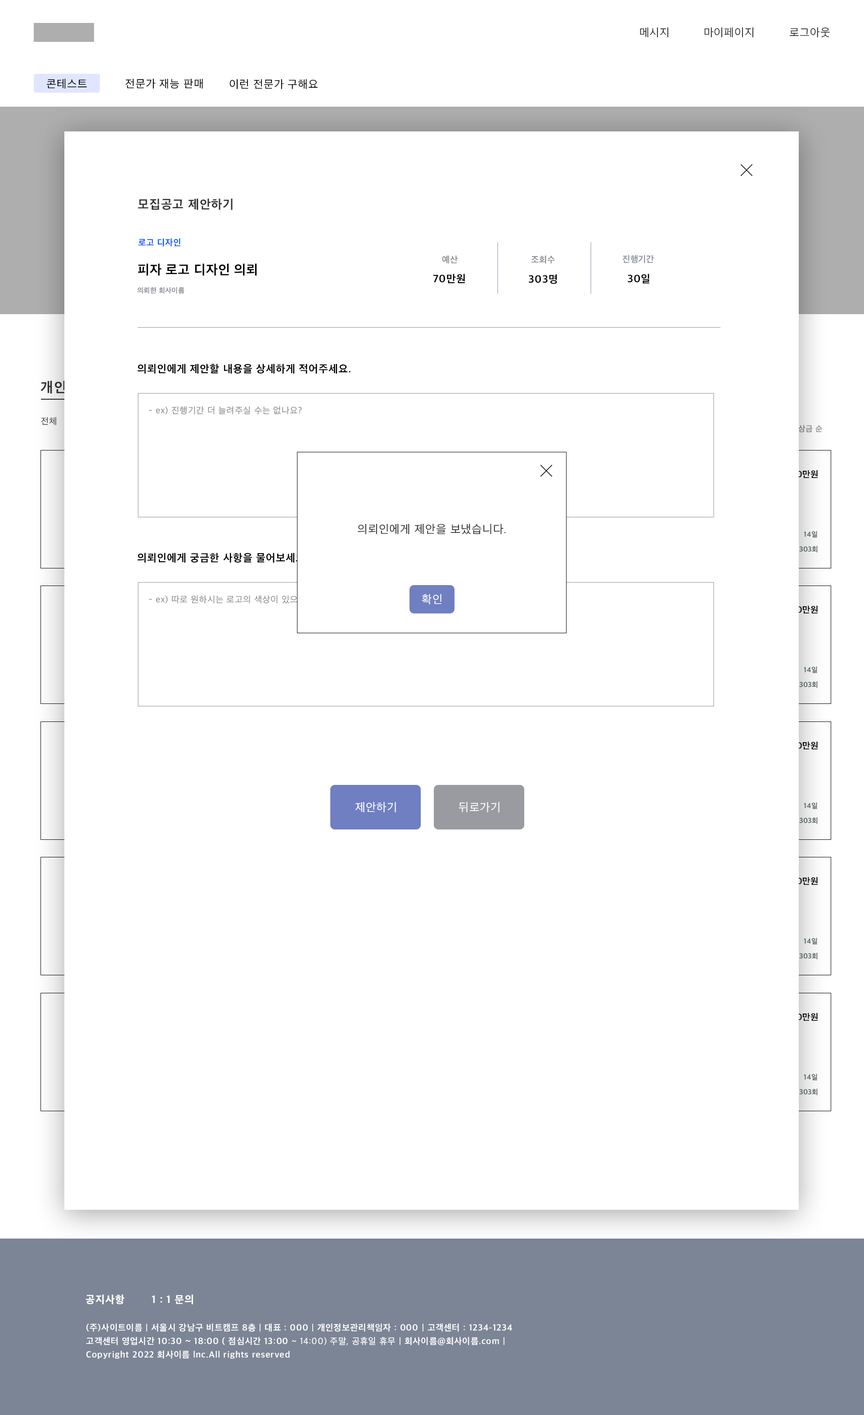
<style>
.page{position:relative;width:864px;height:1415px;background:#ffffff}
.page>*{position:absolute;margin:0}
.t1{font:11.2px "AppleSDGothicNeo-Regular";letter-spacing:0.05em;color:#333333}
.t2{font:11.2px "AppleSDGothicNeo-Regular";letter-spacing:0.05em;color:#000000}
.t3{font:12.7px "AppleSDGothicNeo-Bold";letter-spacing:0.05em;color:#333333}
.t4{font:9px "AppleSDGothicNeo-Bold";letter-spacing:0.03em;color:#0155ff}
.t5{font:9px "AppleSDGothicNeo-Bold";letter-spacing:0.03em;color:#8c9097}
.t6{font:13.5px "AppleSDGothicNeo-Bold";letter-spacing:0.03em;color:#000000}
.t7{font:10.8px "AppleSDGothicNeo-Bold";letter-spacing:0.05em;color:#000000}
.t8{font:7.2px "AppleSDGothicNeo-Bold";letter-spacing:0.03em;color:#8c9097}
.t9{font:14.4px "AppleSDGothicNeo-Bold";letter-spacing:0.05em;color:#333333}
.t10{font:9px "AppleSDGothicNeo-Regular";letter-spacing:0.05em;color:#909090}
.t11{font:9px "AppleSDGothicNeo-Regular";letter-spacing:0.05em;color:#515151}
.t12{font:8.1px "AppleSDGothicNeo-Regular";letter-spacing:0.03em;color:#747474}
.t13{font:9px "AppleSDGothicNeo-Bold";letter-spacing:0.03em;color:#000000}
.t14{font:11.7px "AppleSDGothicNeo-Regular";letter-spacing:0.05em;color:#333333}
.t15{font:7.2px "AppleSDGothicNeo-Bold";letter-spacing:0.03em;color:#606b6e}
.t16{font:11.7px "AppleSDGothicNeo-Regular";letter-spacing:0.05em;color:#ffffff}
.t17{font:10.8px "AppleSDGothicNeo-ExtraBold";letter-spacing:0.05em;color:#ffffff}
.t18{font:9px/13.5px "AppleSDGothicNeo-Bold";letter-spacing:0.05em;color:#ffffff}
.t19{font:9px/13.5px "AppleSDGothicNeo-Regular";letter-spacing:0.05em;color:#ffffff}
</style>
<div class="page">
<p class="t1" style="left:640px;top:27px;width:28px;height:10px">메시지</p>
<p class="t1" style="left:704px;top:27px;width:49px;height:10px">마이페이지</p>
<p class="t1" style="left:790px;top:27px;width:40px;height:10px">로그아웃</p>
<p class="t2" style="left:47px;top:79px;width:40px;height:10px">콘테스트</p>
<p class="t2" style="left:125px;top:79px;width:78px;height:10px">전문가 재능 판매</p>
<p class="t2" style="left:230px;top:79px;width:88px;height:10px">이런 전문가 구해요</p>
<p class="t3" style="left:138px;top:198px;width:95px;height:12px">모집공고 제안하기</p>
<p class="t4" style="left:138px;top:238px;width:42px;height:9px">로고 디자인</p>
<p class="t5" style="left:442px;top:255px;width:16px;height:9px">예산</p>
<p class="t5" style="left:531px;top:255px;width:24px;height:9px">조회수</p>
<p class="t5" style="left:622px;top:255px;width:32px;height:8px">진행기간</p>
<p class="t6" style="left:138px;top:263px;width:119px;height:13px">피자 로고 디자인 의뢰</p>
<p class="t7" style="left:433px;top:274px;width:32px;height:10px">70만원</p>
<p class="t7" style="left:528px;top:274px;width:29px;height:10px">303명</p>
<p class="t7" style="left:627px;top:274px;width:22px;height:10px">30일</p>
<p class="t8" style="left:137px;top:287px;width:47px;height:7px">의뢰한 회사이름</p>
<p class="t7" style="left:137px;top:364px;width:214px;height:10px">의뢰인에게 제안할 내용을 상세하게 적어주세요.</p>
<p class="t9" style="left:40px;top:381px;width:39px;height:13px">개인전</p>
<p class="t10" style="left:148px;top:406px;width:154px;height:8px">- ex) 진행기간 더 늘려주실 수는 없나요?</p>
<p class="t11" style="left:41px;top:417px;width:15px;height:8px">전체</p>
<p class="t12" style="left:798px;top:425px;width:24px;height:7px">상금 순</p>
<p class="t13" style="left:786px;top:470px;width:32px;height:8px">200만원</p>
<p class="t14" style="left:358px;top:524px;width:148px;height:11px">의뢰인에게 제안을 보냈습니다.</p>
<p class="t15" style="left:804px;top:531px;width:13px;height:7px">14일</p>
<p class="t15" style="left:799px;top:546px;width:19px;height:7px">303회</p>
<p class="t7" style="left:137px;top:553px;width:171px;height:9px">의뢰인에게 궁금한 사항을 물어보세요.</p>
<p class="t10" style="left:148px;top:595px;width:179px;height:8px">- ex) 따로 원하시는 로고의 색상이 있으신가요?</p>
<p class="t16" style="left:422px;top:594px;width:19px;height:10px">확인</p>
<p class="t13" style="left:786px;top:605px;width:32px;height:8px">200만원</p>
<p class="t15" style="left:804px;top:666px;width:13px;height:7px">14일</p>
<p class="t15" style="left:799px;top:681px;width:19px;height:7px">303회</p>
<p class="t13" style="left:786px;top:741px;width:32px;height:8px">200만원</p>
<p class="t16" style="left:355px;top:802px;width:41px;height:10px">제안하기</p>
<p class="t16" style="left:459px;top:802px;width:41px;height:10px">뒤로가기</p>
<p class="t15" style="left:804px;top:802px;width:13px;height:7px">14일</p>
<p class="t15" style="left:799px;top:817px;width:19px;height:7px">303회</p>
<p class="t13" style="left:786px;top:877px;width:32px;height:8px">200만원</p>
<p class="t15" style="left:804px;top:938px;width:13px;height:7px">14일</p>
<p class="t15" style="left:799px;top:953px;width:19px;height:6px">303회</p>
<p class="t13" style="left:786px;top:1012px;width:32px;height:9px">200만원</p>
<p class="t15" style="left:804px;top:1074px;width:13px;height:6px">14일</p>
<p class="t15" style="left:799px;top:1089px;width:19px;height:6px">303회</p>
<p class="t17" style="left:86px;top:1294px;width:39px;height:10px">공지사항</p>
<p class="t17" style="left:152px;top:1294px;width:41px;height:10px">1 : 1 문의</p>
<p class="t18" style="left:86px;top:1323px;width:426px;height:36px">(주)사이트이름 | 서울시 강남구 비트캠프 8층 | 대표 : 000 | 개인정보관리책임자 : 000 | 고객센터 : 1234-1234<br>고객센터 영업시간 10:30 ~ 18:00 ( 점심시간 13:00<span class="t19"> ~ 14:00) 주말, 공휴일 휴무</span> | 회사이름@회사이름.com | <br>Copyright 2022 회사이름 lnc.All rights reserved</p>
</div>
